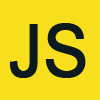
<style>
.page{position:relative;width:100px;height:100px;background:#f7df1e}
.page>*{position:absolute;margin:0}
.t1{font:71.9px "ArialMT";letter-spacing:0.01em;color:#0c1a1e;font-weight:bold;scale:0.91 1}
</style>
<div class="page">
<p class="t1" style="left:9px;top:23px;width:77px;height:55px">JS</p>
</div>
